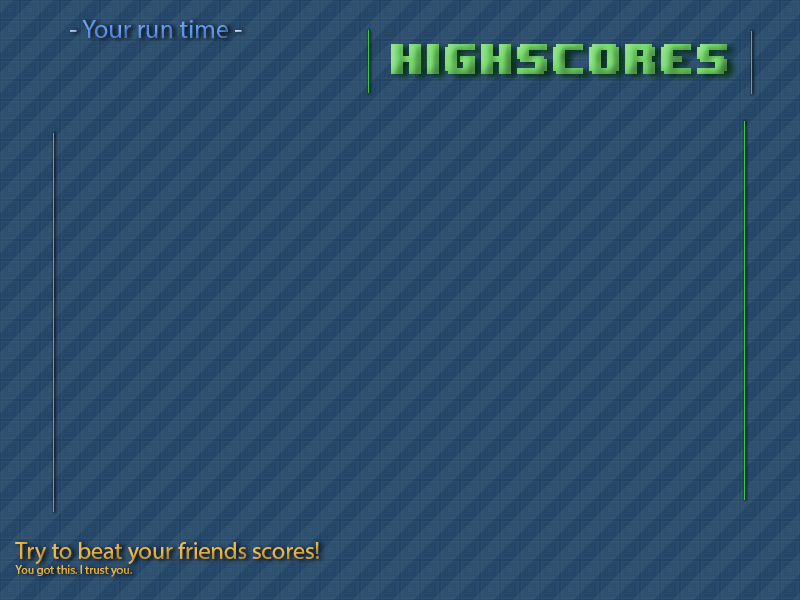
<style>
.page{position:relative;width:800px;height:600px}
.page>*{position:absolute;margin:0}
.t1{font:26px "MyriadPro-Regular";color:#5b94e9}
.t2{font:26px "MyriadPro-Regular";color:#b3cdf1}
.t3{font:26px "MyriadPro-Regular";color:#c9dcf6}
.t4{font:36px "8BITWONDERNominal"}
.t5{font:24px "MyriadPro-Regular";color:#eab33d}
.t6{font:12px "MyriadPro-Regular";color:#eab33d}
</style>
<div class="page">
<p class="t1" style="left:70px;top:20px;width:172px;height:18px"><span class="t2">- </span>Your run time <span class="t3">-</span></p>
<p class="t4" style="left:391px;top:44px;width:336px;height:30px">Highscores</p>
<p class="t5" style="left:15px;top:542px;width:304px;height:35px">Try to beat your friends scores!<br><span class="t6">You got this. I trust you.</span></p>
</div>
